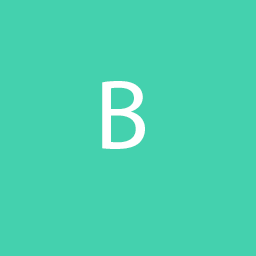
<style>
.page{position:relative;width:256px;height:256px;background:#44d1ae}
.page>*{position:absolute;margin:0}
.t1{font:100px "MyriadPro-Regular";color:#ffffff}
</style>
<div class="page">
<p class="t1" style="left:102px;top:81px;width:43px;height:68px">B</p>
</div>
